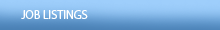
<style>
.page{position:relative;width:220px;height:30px}
.page>*{position:absolute;margin:0}
.t1{font:12px "MyriadPro-Regular";color:#ffffff;text-transform:uppercase}
</style>
<div class="page">
<p class="t1" style="left:21px;top:10px;width:67px;height:9px">Job Listings</p>
</div>
